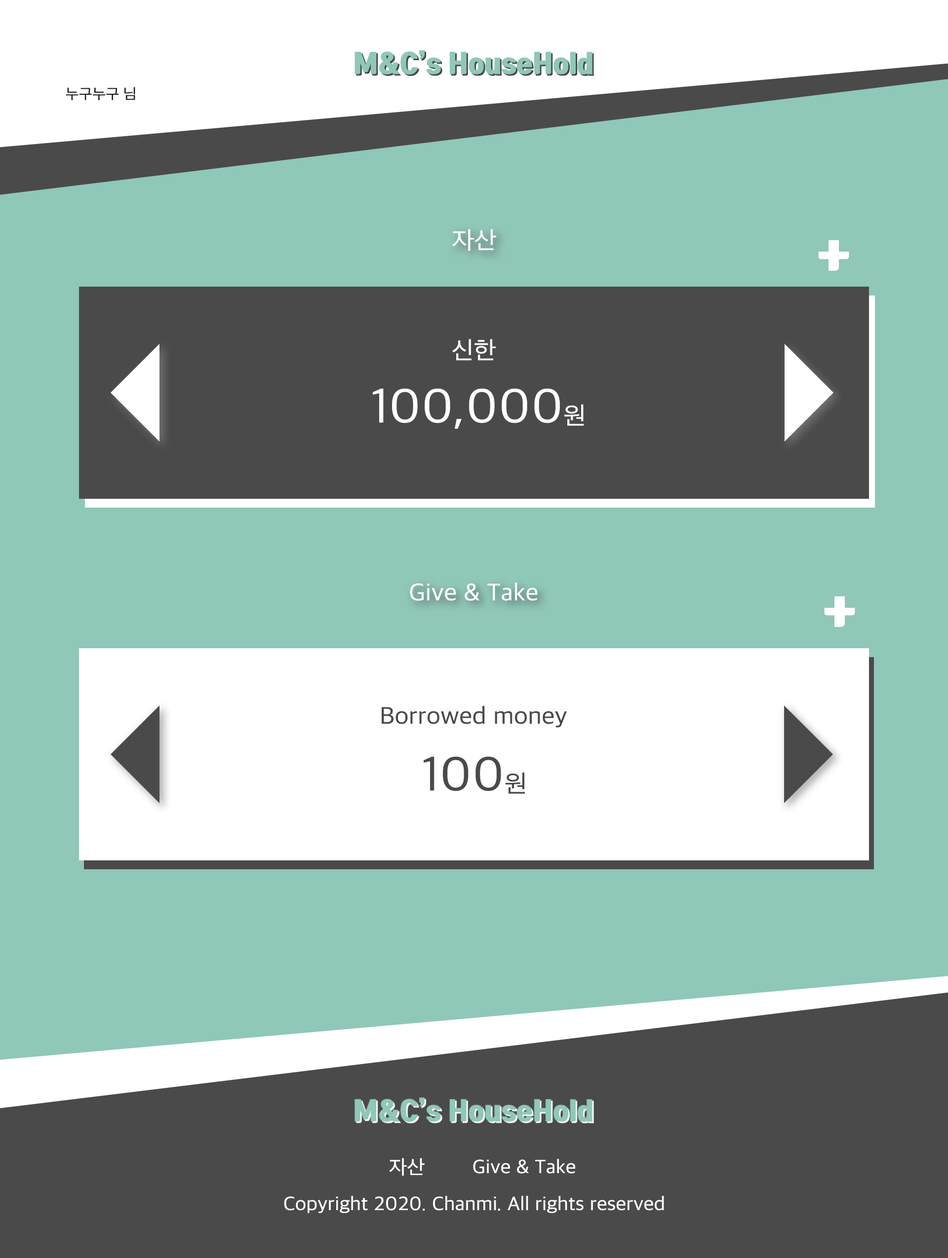
<style>
.page{position:relative;width:948px;height:1258px;background:#8fc7b8}
.page>*{position:absolute;margin:0}
.t1{font:14.8px "AppleSDGothicNeo-Regular";color:#1c1c1c;scale:1.05 1}
.t2{font:24.7px "AppleSDGothicNeo-Regular";color:#ffffff;scale:1.05 1}
.t3{font:49.4px "TmonMonsoriOTFBlack";color:#ffffff;scale:1.05 1}
.t4{font:49.4px "AppleSDGothicNeo-Regular";color:#ffffff;scale:1.05 1}
.t5{font:24.7px "AppleSDGothicNeo-Regular";color:#4a4a4a;scale:1.05 1}
.t6{font:49.4px "AppleSDGothicNeo-Regular";color:#4a4a4a;scale:1.05 1}
.t7{font:19.7px "AppleSDGothicNeo-Regular";color:#ffffff;scale:1.05 1}
</style>
<div class="page">
<p class="t1" style="left:66px;top:87px;width:69px;height:13px">누구누구 님</p>
<p class="t2" style="left:452px;top:229px;width:44px;height:22px">자산</p>
<p class="t3" style="left:818px;top:240px;width:31px;height:31px">+</p>
<p class="t2" style="left:452px;top:339px;width:43px;height:22px">신한</p>
<p class="t4" style="left:373px;top:388px;width:211px;height:41px">100,000<span class="t2">원</span></p>
<p class="t2" style="left:410px;top:583px;width:127px;height:18px">Give &amp; Take</p>
<p class="t3" style="left:824px;top:596px;width:31px;height:31px">+</p>
<p class="t5" style="left:381px;top:706px;width:186px;height:22px">Borrowed money</p>
<p class="t6" style="left:423px;top:757px;width:102px;height:37px">100<span class="t5">원</span></p>
<p class="t7" style="left:389px;top:1158px;width:35px;height:18px">자산</p>
<p class="t7" style="left:473px;top:1159px;width:102px;height:15px">Give &amp; Take</p>
<p class="t7" style="left:284px;top:1196px;width:380px;height:18px">Copyright 2020. Chanmi. All rights reserved</p>
</div>
